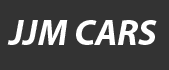
<style>
.page{position:relative;width:169px;height:70px;background:#333333}
.page>*{position:absolute;margin:0}
.t1{font:36px "MyriadPro-BoldIt";color:#ffffff}
</style>
<div class="page">
<p class="t1" style="left:7px;top:20px;width:150px;height:25px">JJM CARS</p>
</div>
